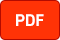
<style>
.page{position:relative;width:60px;height:40px;background:#ff3306}
.page>*{position:absolute;margin:0}
.t1{font:15px "S-CoreDream-7ExtraBold";color:#ffffff}
</style>
<div class="page">
<p class="t1" style="left:16px;top:14px;width:28px;height:12px">PDF</p>
</div>
